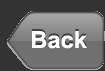
<style>
.page{position:relative;width:105px;height:71px;background:#333333}
.page>*{position:absolute;margin:0}
.t1{font:23.4px "Arial-BoldMT";color:#ffffff}
</style>
<div class="page">
<p class="t1" style="left:32px;top:31px;width:55px;height:18px">Back</p>
</div>
